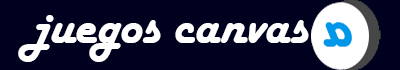
<style>
.page{position:relative;width:400px;height:70px;background:#00011f}
.page>*{position:absolute;margin:0}
.t1{font:53.1px "HarlowSolid";color:#ffffff}
</style>
<div class="page">
<p class="t1" style="left:18px;top:15px;width:291px;height:47px">juegos canvas</p>
</div>
